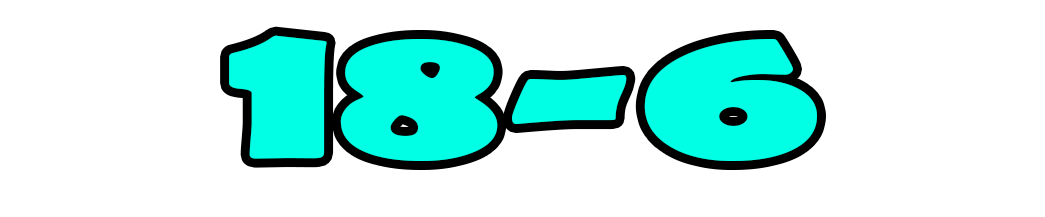
<style>
.page{position:relative;width:1045px;height:217px;background:#ffffff}
.page>*{position:absolute;margin:0}
.t1{font:195.3px "BerlinSansFB-Bold";color:#00ffe4;scale:1.55 1}
</style>
<div class="page">
<p class="t1" style="left:229px;top:35px;width:588px;height:126px">18-6</p>
</div>
